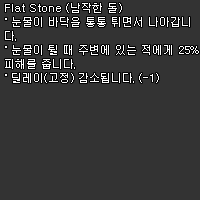
<style>
.page{position:relative;width:200px;height:200px;background:#333333}
.page>*{position:absolute;margin:0}
.t1{font:11px/14px "Dotum";color:#ffffff}
</style>
<div class="page">
<p class="t1" style="left:5px;top:3px;width:194px;height:80px">Flat Stone (남작한 돌)<br>˚ 눈물이 바닥을 통통 튀면서 나아갑니<br>다.<br>˚ 눈물이 튈 때 주변에 있는 적에게 25%<br>피해를 줍니다.<br>˚ 딜레이(고정) 감소됩니다. (-1)</p>
</div>
